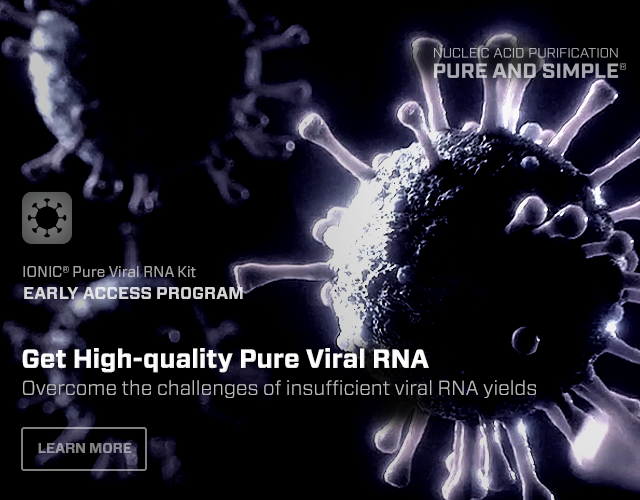
<style>
.page{position:relative;width:640px;height:500px;background:#000000}
.page>*{position:absolute;margin:0}
.t1{font:15px "Forza-Book";color:#a3a3a3}
.t2{font:15px "Forza-Book";color:#a3a3a3;text-transform:uppercase}
.t3{font:17px "Forza-Bold";color:#d5d4d6;text-transform:uppercase}
.t4{font:20px/27px "Forza-Light";color:#bbbbbb}
.t5{font:26px/27px "Forza-Bold";color:#ffffff}
.t6{font:14.3px "Forza-Bold";letter-spacing:-0.01em;color:#7c868c;text-transform:uppercase}
</style>
<div class="page">
<p class="t1" style="left:23px;top:266px;width:173px;height:12px"><span class="t2">Ionic® </span>Pure Viral RNA Kit</p>
<p class="t3" style="left:24px;top:287px;width:219px;height:12px">Early Access Program</p>
<p class="t4" style="left:22px;top:348px;width:514px;height:50px"><span class="t5">Get High-quality Pure Viral RNA <br></span>Overcome the challenges of insufficient viral RNA yields</p>
<p class="t6" style="left:38px;top:443px;width:94px;height:10px">Learn More</p>
</div>
